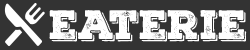
<style>
.page{position:relative;width:250px;height:50px;background:#333333}
.page>*{position:absolute;margin:0}
.t1{font:39.9px "NexaRustSlab-BlackShadow01";color:#ffffff}
</style>
<div class="page">
<p class="t1" style="left:49px;top:10px;width:198px;height:32px">eaterie</p>
</div>
